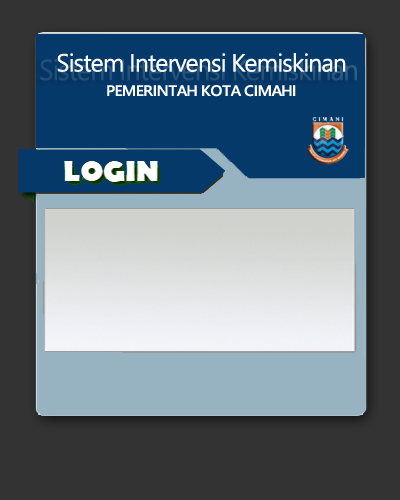
<style>
.page{position:relative;width:400px;height:500px;background:#333333}
.page>*{position:absolute;margin:0}
.t1{font:24.9px "SegoeUI";letter-spacing:-0.04em;color:#ffffff}
.t2{font:15px "SegoeUI-Semibold";letter-spacing:-0.04em;color:#ffffff;scale:1.06 1}
</style>
<div class="page">
<p class="t1" style="left:57px;top:53px;width:289px;height:19px">Sistem Intervensi Kemiskinan</p>
<p class="t2" style="left:107px;top:85px;width:189px;height:12px">PEMERINTAH KOTA CIMAHI</p>
</div>
